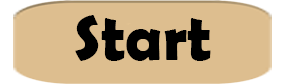
<style>
.page{position:relative;width:283px;height:84px;background:#ddbe8f}
.page>*{position:absolute;margin:0}
.t1{font:64px "BerlinSansFBDemi-Bold";color:#000000}
</style>
<div class="page">
<p class="t1" style="left:75px;top:15px;width:136px;height:46px">Start</p>
</div>
